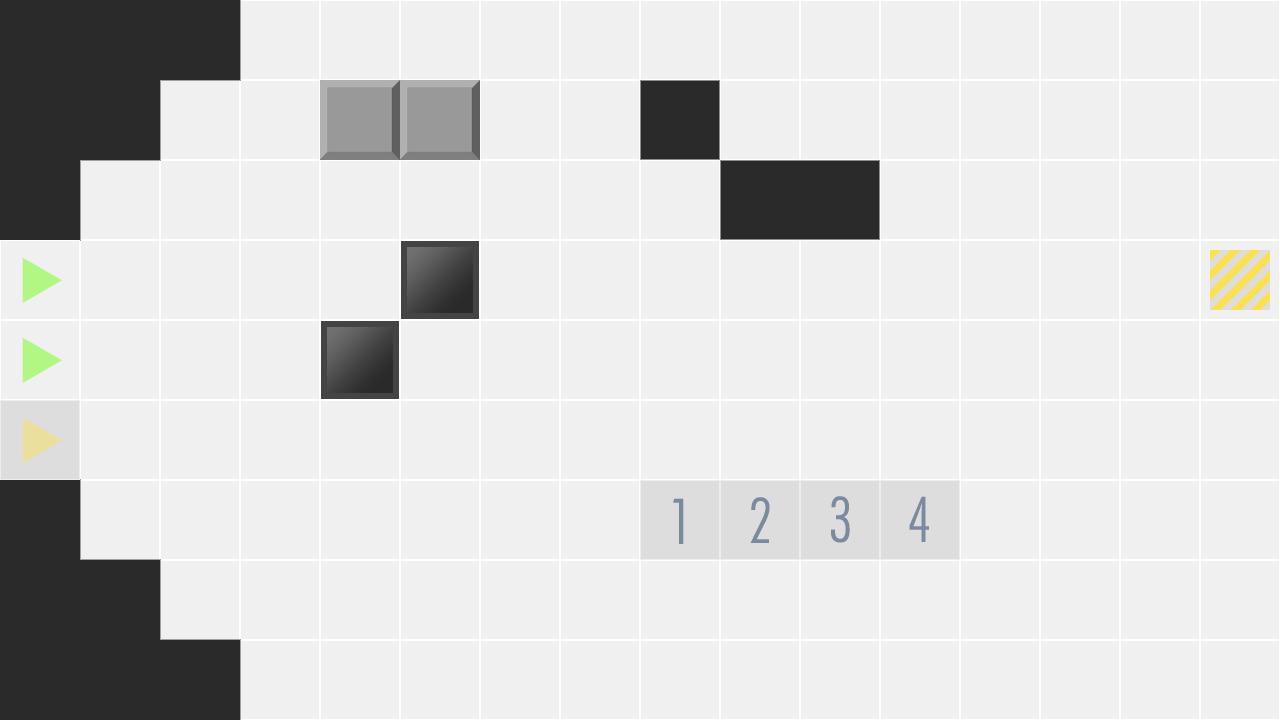
<style>
.page{position:relative;width:1280px;height:720px;background:#f0f0f0}
.page>*{position:absolute;margin:0}
.t1{font:60px "FuturaLT-CondensedLight";color:#7a8b9e}
</style>
<div class="page">
<p class="t1" style="left:750px;top:497px;width:20px;height:46px">2</p>
<p class="t1" style="left:831px;top:496px;width:19px;height:47px">3</p>
<p class="t1" style="left:909px;top:496px;width:20px;height:46px">4</p>
<p class="t1" style="left:673px;top:498px;width:11px;height:46px">1</p>
</div>
